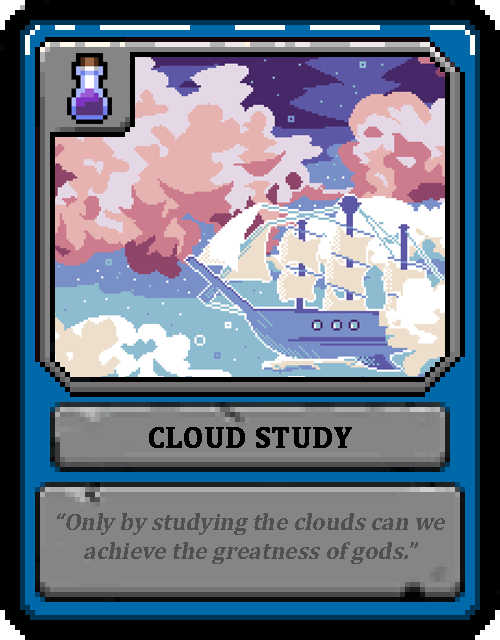
<style>
.page{position:relative;width:500px;height:640px}
.page>*{position:absolute;margin:0}
.t1{font:30px "Cambria-Bold";color:#000000;text-transform:uppercase;font-weight:bold}
.t2{font:24px "Cambria-Bold";color:#505050;font-style:italic}
</style>
<div class="page">
<p class="t1" style="left:149px;top:427px;width:203px;height:21px">Cloud Study</p>
<p class="t2" style="left:57px;top:513px;width:388px;height:51px;text-align:center">“Only by studying the clouds can we achieve the greatness of gods.”</p>
</div>
